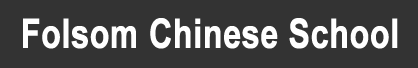
<style>
.page{position:relative;width:418px;height:68px;background:#333333}
.page>*{position:absolute;margin:0}
.t1{font:40.6px "Arial-BoldMT";color:#ffffff;font-weight:bold;scale:0.79 1}
</style>
<div class="page">
<p class="t1" style="left:23px;top:18px;width:375px;height:31px">Folsom Chinese School</p>
</div>
